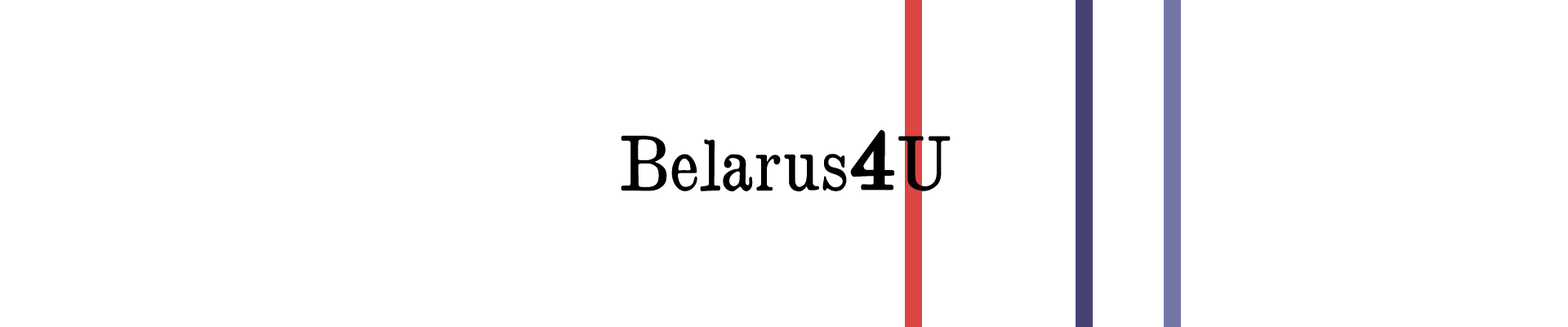
<style>
.page{position:relative;width:1568px;height:327px;background:#ffffff}
.page>*{position:absolute;margin:0}
.t1{font:58.8px "Brokgauz&Efron";color:#000000}
.t2{font:75.1px "Brokgauz&Efron";color:#000000}
</style>
<div class="page">
<p class="t1" style="left:621px;top:129px;width:330px;height:62px">Belarus<span class="t2">4</span>U</p>
</div>
